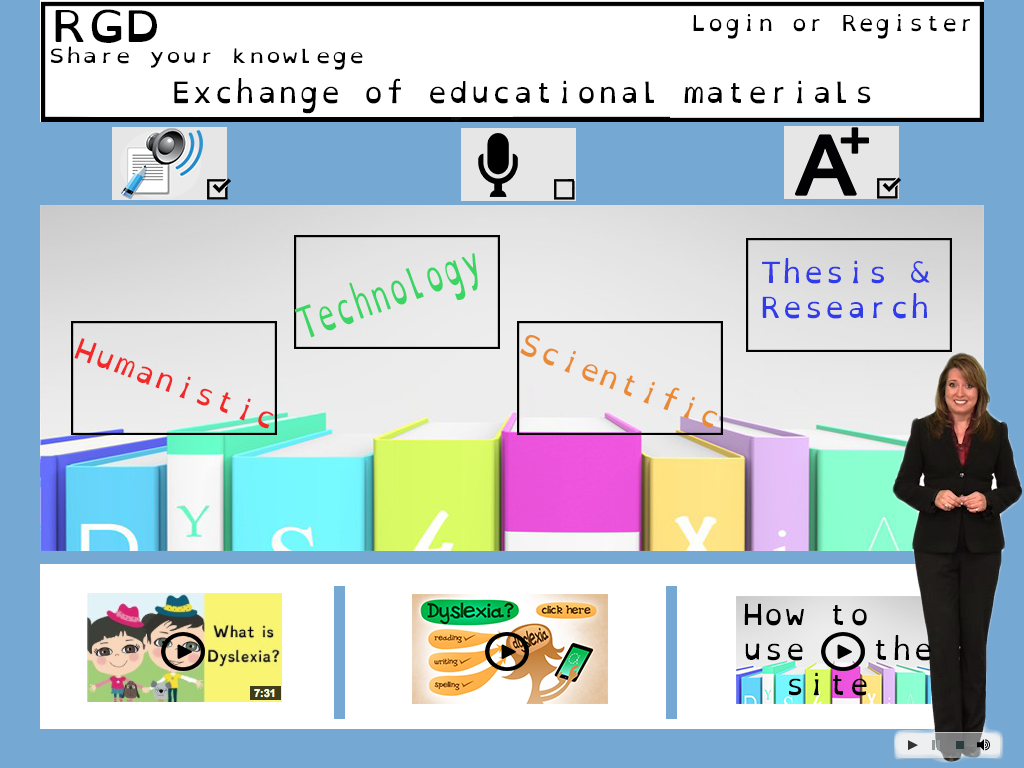
<style>
.page{position:relative;width:1024px;height:768px;background:#ffffff}
.page>*{position:absolute;margin:0}
.t1{font:43.9px "OpenDyslexicMono-Regular";color:#000000;scale:1.14 1}
.t2{font:22px "OpenDyslexicMono-Regular";color:#000000;scale:1.04 1}
.t3{font:19.3px "OpenDyslexicMono-Regular";color:#000000;scale:1.18 1}
.t4{font:29.2px "OpenDyslexicMono-Regular";color:#000000}
.t5{font:43.7px "OpenDyslexicMono-Regular";color:#3ad562;scale:0.6 1}
.t6{font:29.2px "OpenDyslexicMono-Regular";color:#323be8}
.t7{font:29.2px "OpenDyslexicMono-Regular";color:#f12929}
.t8{font:29.2px "OpenDyslexicMono-Regular";color:#e98a36}
</style>
<div class="page">
<p class="t1" style="left:55px;top:12px;width:102px;height:34px">RGD</p>
<p class="t1" style="left:55px;top:9px;width:102px;height:34px">RGD</p>
<p class="t2" style="left:693px;top:14px;width:277px;height:25px">Login or Register</p>
<p class="t3" style="left:51px;top:46px;width:312px;height:24px">Share your knowlege</p>
<p class="t4" style="left:174px;top:78px;width:697px;height:36px">Exchange of educational materials</p>
<p class="t5" style="left:294px;top:253px;width:184px;height:85px;rotate:-20deg">Technology</p>
<p class="t6" style="left:762px;top:258px;width:168px;height:61px">Thesis &amp;<br>Research</p>
<p class="t7" style="left:74px;top:338px;width:200px;height:91px;rotate:20deg">Humanistic</p>
<p class="t8" style="left:520px;top:335px;width:198px;height:93px;rotate:21deg">Scientific</p>
<p class="t4" style="left:744px;top:603px;width:187px;height:93px">How to<br>use   the <br>  site</p>
</div>
